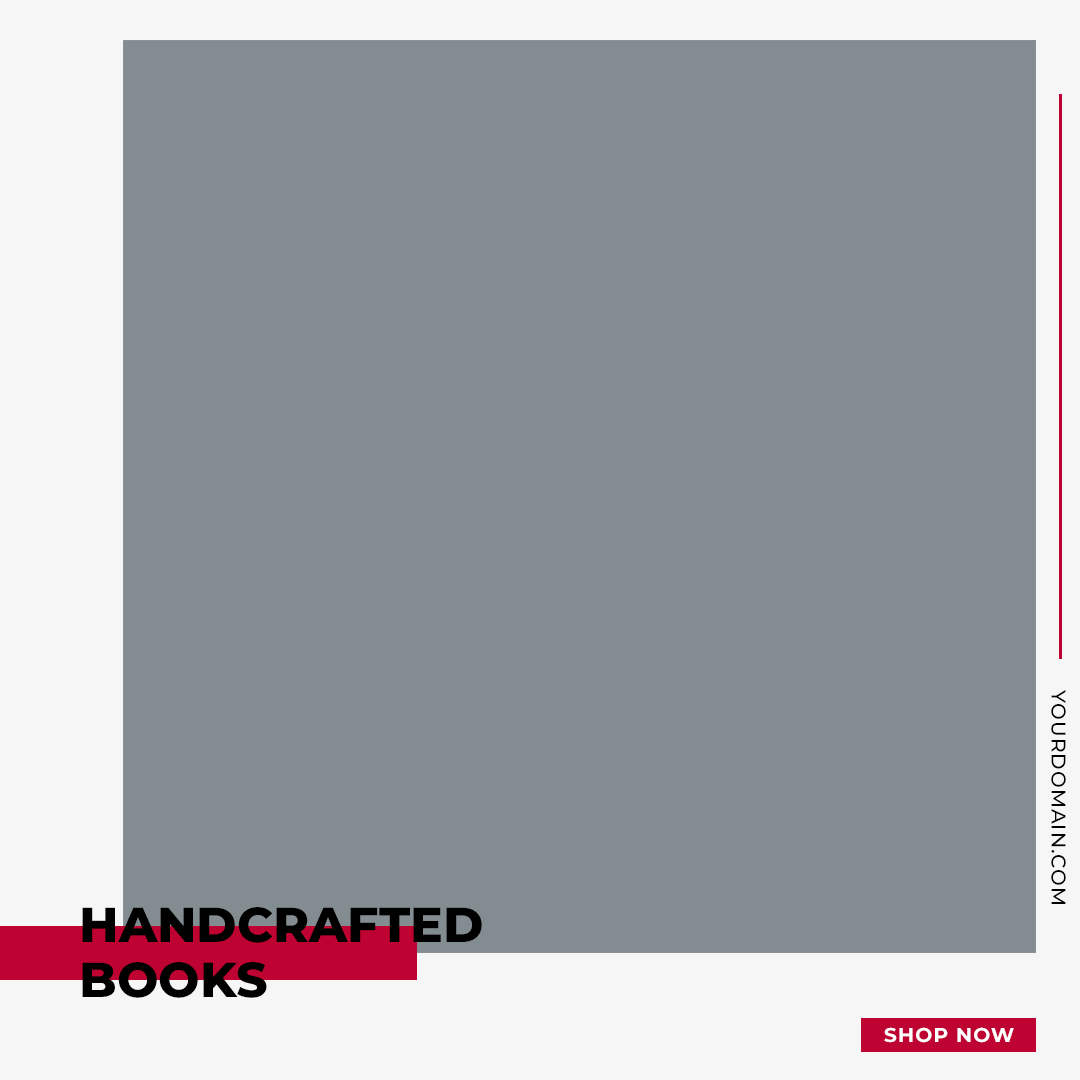
<style>
.page{position:relative;width:1080px;height:1080px;background:#838c91}
.page>*{position:absolute;margin:0}
.t1{font:20px "Montserrat-Medium";letter-spacing:0.05em;color:#000000;text-transform:uppercase}
.t2{font:48.9px/55px "Montserrat-ExtraBold";color:#000000;text-transform:uppercase}
.t3{font:20.2px "Montserrat-Bold";letter-spacing:0.05em;color:#ffffff;text-transform:uppercase}
</style>
<div class="page">
<p class="t1" style="left:1051px;top:690px;width:15px;height:214px;rotate:90deg">Yourdomain.com</p>
<p class="t2" style="left:82px;top:907px;width:400px;height:91px">Handcrafted<br>Books</p>
<p class="t3" style="left:884px;top:1027px;width:130px;height:16px">Shop Now</p>
</div>
